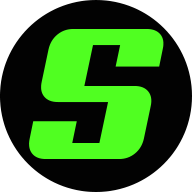
<style>
.page{position:relative;width:192px;height:192px;background:#020202}
.page>*{position:absolute;margin:0}
.t1{font:188.6px "Aero";color:#51ff22}
</style>
<div class="page">
<p class="t1" style="left:29px;top:29px;width:135px;height:130px">S</p>
</div>
